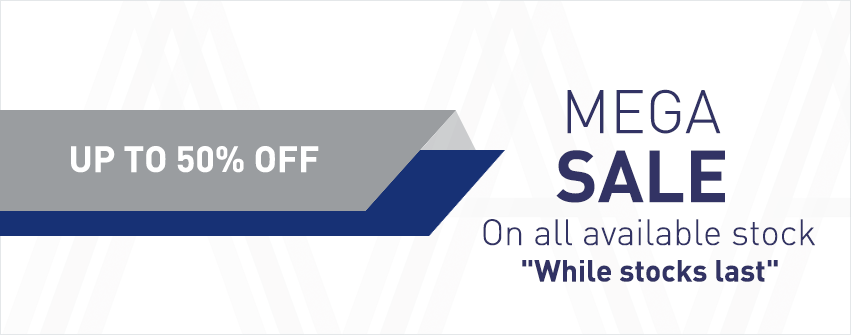
<style>
.page{position:relative;width:851px;height:335px;background:#ffffff}
.page>*{position:absolute;margin:0}
.t1{font:60px "DIN-Light";color:#323364}
.t2{font:36px "DIN-Bold";color:#ffffff}
.t3{font:72px "DIN-Bold";color:#323364}
.t4{font:36px "DIN-Light";color:#323364}
.t5{font:30px "DIN-Bold";color:#323364}
</style>
<div class="page">
<p class="t1" style="left:567px;top:89px;width:154px;height:45px">MEGA</p>
<p class="t2" style="left:71px;top:146px;width:248px;height:27px">UP TO 50% OFF</p>
<p class="t3" style="left:556px;top:150px;width:169px;height:53px">SALE</p>
<p class="t4" style="left:483px;top:219px;width:332px;height:27px">On all available stock</p>
<p class="t5" style="left:522px;top:260px;width:256px;height:22px">"While stocks last"</p>
</div>
